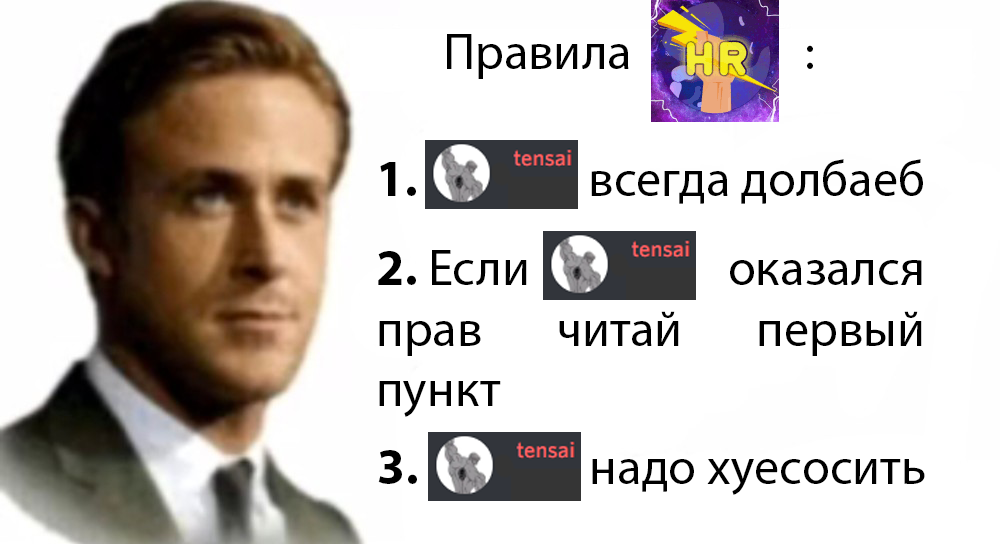
<style>
.page{position:relative;width:1000px;height:544px;background:#ffffff}
.page>*{position:absolute;margin:0}
.t1{font:50.7px "MyriadPro-Regular";color:#000000}
.t2{font:50.7px "MyriadPro-Bold";color:#000000}
</style>
<div class="page">
<p class="t1" style="left:447px;top:34px;width:366px;height:45px">Правила                :</p>
<p class="t1" style="left:380px;top:159px;width:543px;height:45px"><span class="t2">1.</span>        всегда долбаеб</p>
<p class="t1" style="left:378px;top:250px;width:544px;height:167px;text-align:justify"><span class="t2">2. </span>Если         оказался прав читай первый пункт</p>
<p class="t1" style="left:378px;top:450px;width:547px;height:45px"><span class="t2">3.</span>        надо хуесосить</p>
</div>
